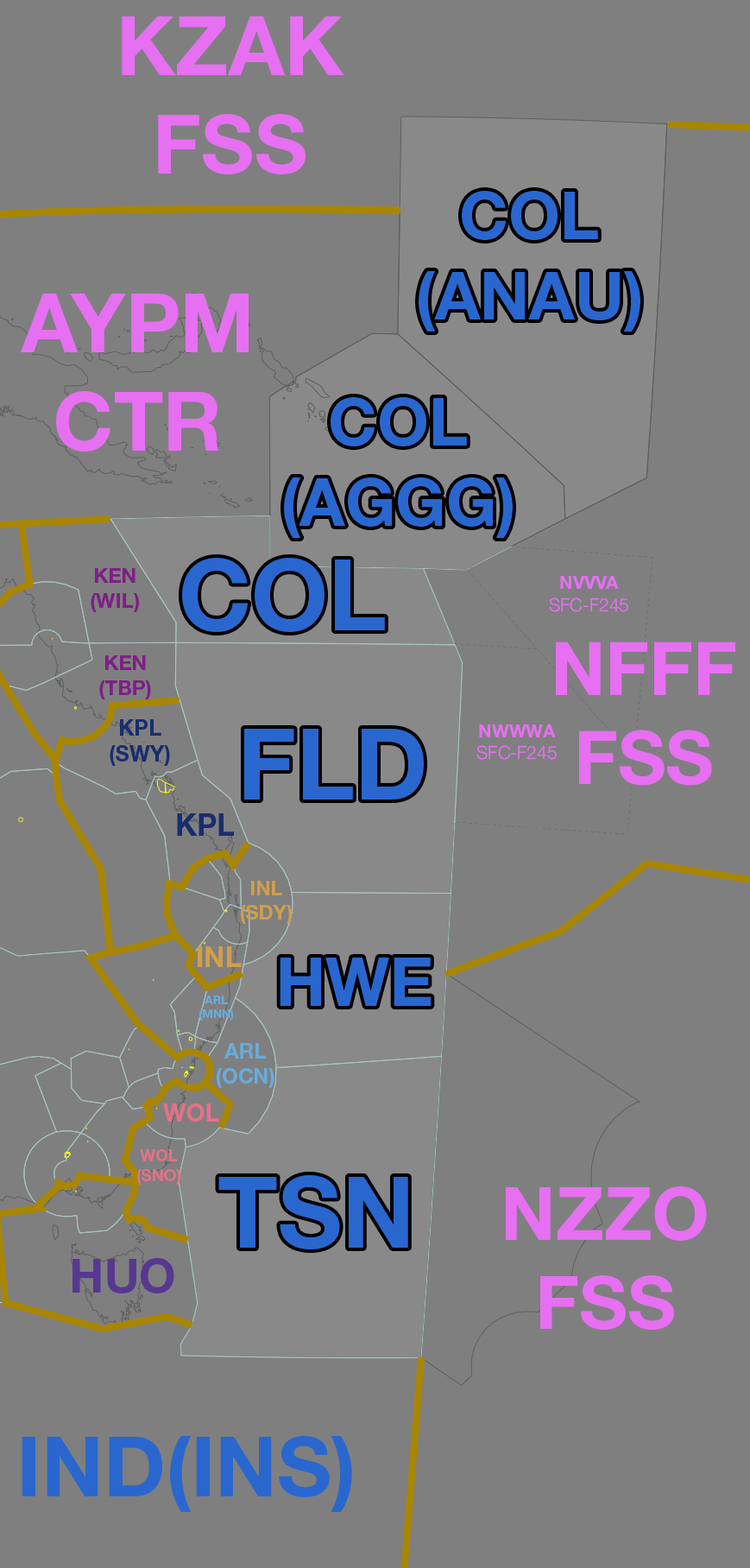
<style>
.page{position:relative;width:750px;height:1568px;background:#7f7f7f}
.page>*{position:absolute;margin:0}
.t1{font:81.7px "HelveticaNeueLTStd-Bd";color:#e670f1}
.t2{font:66.5px "HelveticaNeueLTStd-Bd";color:#2967cf}
.t3{font:98.7px "HelveticaNeueLTStd-Bd";color:#2967cf}
.t4{font:20.6px "HelveticaNeueLTStd-Bd";color:#7e1e87}
.t5{font:18.1px "HelveticaNeue-Light";color:#e570f1}
.t6{font:18.1px "HelveticaNeue-Bold";color:#e570f1}
.t7{font:74.2px "HelveticaNeue-Bold";color:#e670f1}
.t8{font:21.9px "HelveticaNeueLTStd-Bd";color:#182e6d}
.t9{font:30.5px "HelveticaNeueLTStd-Bd";color:#182e6d}
.t10{font:20px "HelveticaNeueLTStd-Bd";color:#d09f4a}
.t11{font:28.8px "HelveticaNeueLTStd-Bd";color:#d09f4a}
.t12{font:67.9px "HelveticaNeueLTStd-Bd";color:#2967cf}
.t13{font:11.8px "HelveticaNeueLTStd-Bd";color:#67acdc}
.t14{font:20.8px "HelveticaNeueLTStd-Bd";color:#67acdc}
.t15{font:24.7px "HelveticaNeueLTStd-Bd";color:#e57187}
.t16{font:16.5px "HelveticaNeueLTStd-Bd";color:#e57187}
.t17{font:74.2px "HelveticaNeueLTStd-Bd";color:#e670f1}
.t18{font:47.2px "HelveticaNeueLTStd-Bd";color:#573890}
.t19{font:83.9px "HelveticaNeueLTStd-Bd";color:#2967cf}
</style>
<div class="page">
<p class="t1" style="left:122px;top:16px;width:223px;height:158px;text-align:center">KZAK<br>FSS</p>
<p class="t2" style="left:419px;top:191px;width:222px;height:141px;text-align:center">COL<br>(ANAU)</p>
<p class="t1" style="left:21px;top:294px;width:228px;height:158px;text-align:center">AYPM<br>CTR</p>
<p class="t2" style="left:284px;top:397px;width:229px;height:141px;text-align:center">COL<br>(AGGG)</p>
<p class="t3" style="left:182px;top:558px;width:203px;height:74px">COL</p>
<p class="t4" style="left:91px;top:568px;width:48px;height:44px;text-align:center">KEN<br>(WIL)</p>
<p class="t5" style="left:549px;top:576px;width:80px;height:36px;text-align:center"><span class="t6">NVVVA<br></span>SFC-F245</p>
<p class="t7" style="left:556px;top:642px;width:180px;height:144px;text-align:center">NFFF<br>FSS</p>
<p class="t4" style="left:99px;top:655px;width:52px;height:44px;text-align:center">KEN<br>(TBP)</p>
<p class="t8" style="left:110px;top:719px;width:60px;height:47px;text-align:center">KPL<br>(SWY)</p>
<p class="t5" style="left:477px;top:724px;width:80px;height:36px;text-align:center"><span class="t6">NWWWA<br></span>SFC-F245</p>
<p class="t3" style="left:244px;top:729px;width:180px;height:71px">FLD</p>
<p class="t9" style="left:177px;top:813px;width:57px;height:23px">KPL</p>
<p class="t10" style="left:241px;top:881px;width:51px;height:43px;text-align:center">INL<br>(SDY)</p>
<p class="t11" style="left:198px;top:946px;width:44px;height:21px">INL</p>
<p class="t12" style="left:280px;top:958px;width:152px;height:48px">HWE</p>
<p class="t13" style="left:199px;top:996px;width:35px;height:25px;text-align:center">ARL<br>(MNN)</p>
<p class="t14" style="left:217px;top:1043px;width:58px;height:45px;text-align:center">ARL<br>(OCN)</p>
<p class="t15" style="left:163px;top:1103px;width:56px;height:19px">WOL</p>
<p class="t16" style="left:137px;top:1149px;width:43px;height:36px;text-align:center">WOL<br>(SNO)</p>
<p class="t3" style="left:218px;top:1175px;width:190px;height:74px">TSN</p>
<p class="t17" style="left:506px;top:1186px;width:201px;height:144px;text-align:center">NZZO<br>FSS</p>
<p class="t18" style="left:73px;top:1258px;width:101px;height:35px">HUO</p>
<p class="t19" style="left:22px;top:1436px;width:330px;height:76px">IND(INS)</p>
</div>
